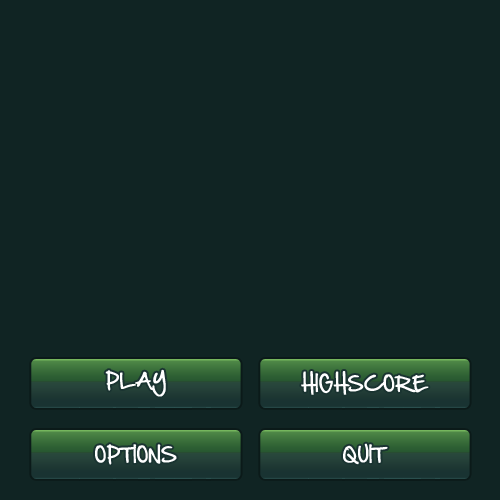
<style>
.page{position:relative;width:500px;height:500px;background:#102423}
.page>*{position:absolute;margin:0}
.t1{font:18.2px "HandOfSean";color:#ffffff}
</style>
<div class="page">
<p class="t1" style="left:105px;top:369px;width:61px;height:28px">PLAY</p>
<p class="t1" style="left:301px;top:371px;width:128px;height:24px">HIGHSCORE</p>
<p class="t1" style="left:95px;top:444px;width:82px;height:21px">OPTIONS</p>
<p class="t1" style="left:343px;top:443px;width:45px;height:22px">QUIT</p>
</div>
